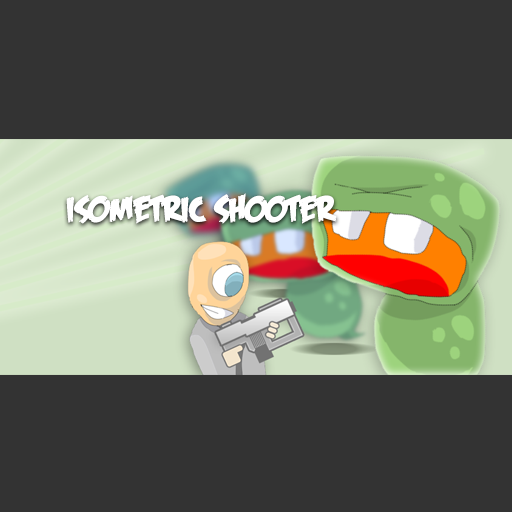
<style>
.page{position:relative;width:512px;height:512px;background:#333333}
.page>*{position:absolute;margin:0}
.t1{font:36px "FeastofFleshBB";color:#ffffff;font-weight:bold}
</style>
<div class="page">
<p class="t1" style="left:66px;top:193px;width:271px;height:31px">Isometric Shooter</p>
</div>
